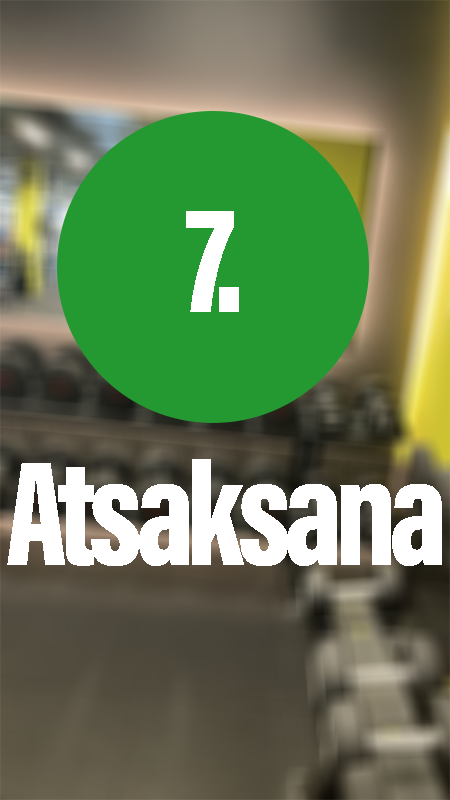
<style>
.page{position:relative;width:450px;height:800px;background:#249831}
.page>*{position:absolute;margin:0}
.t1{font:156.2px "AcuminConcept-ExtraCondensedBlack";letter-spacing:-0.05em;color:#ffffff}
.t2{font:152.3px "AcuminConcept-ExtraCondensedBlack";letter-spacing:-0.05em;color:#ffffff}
</style>
<div class="page">
<p class="t1" style="left:186px;top:211px;width:53px;height:101px">7.</p>
<p class="t2" style="left:7px;top:459px;width:435px;height:107px">Atsaksana</p>
</div>
